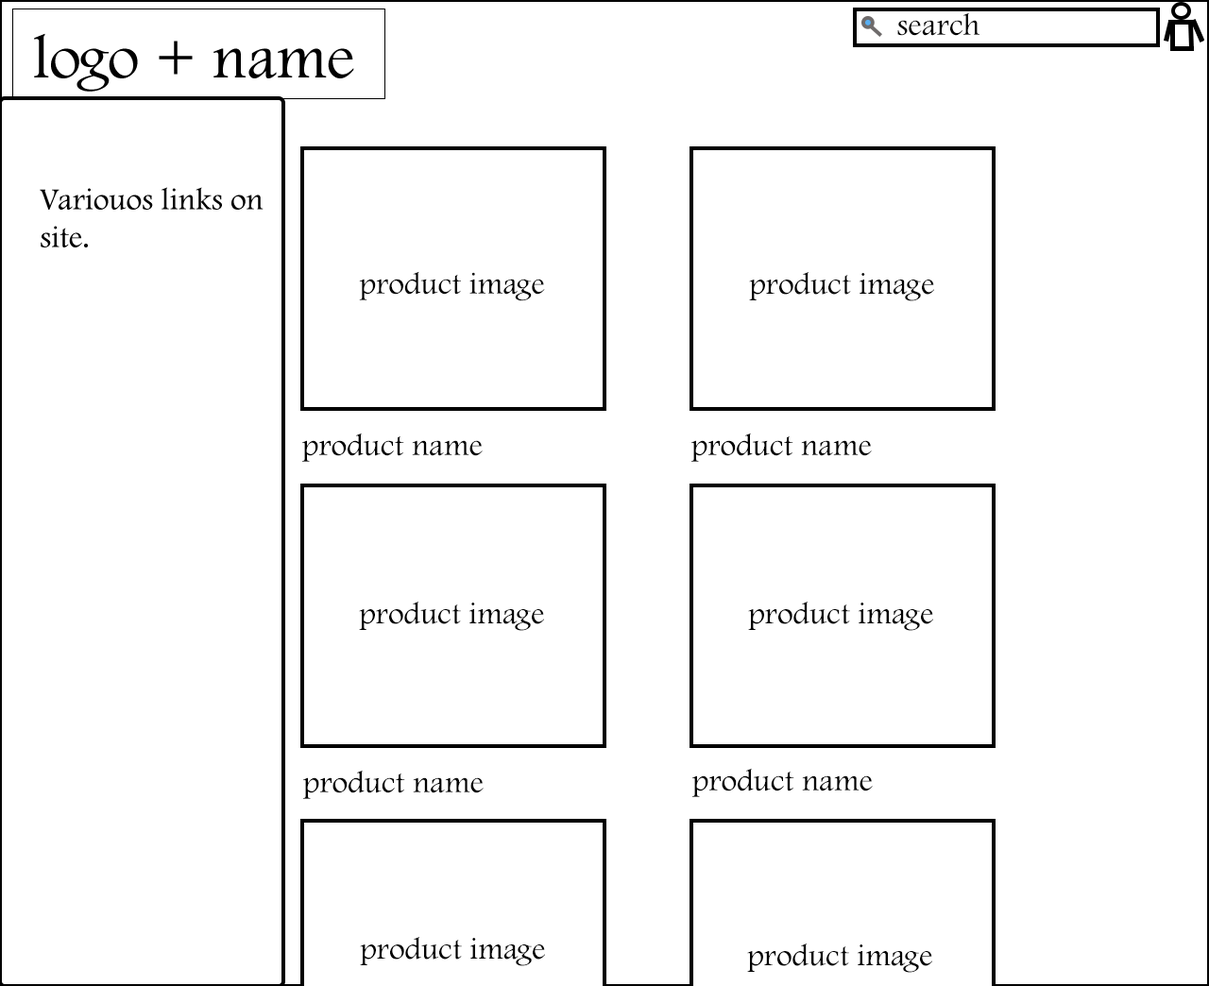
<style>
.page{position:relative;width:1209px;height:986px;background:#ffffff}
.page>*{position:absolute;margin:0}
.t1{font:31.5px "FootlightMTLight";color:#000000}
</style>
<div class="page">
<p class="t1" style="left:897px;top:12px;width:83px;height:24px">search</p>
<p class="t1" style="left:359px;top:271px;width:186px;height:30px">product image</p>
<p class="t1" style="left:749px;top:272px;width:185px;height:29px">product image</p>
<p class="t1" style="left:302px;top:433px;width:181px;height:29px">product name</p>
<p class="t1" style="left:691px;top:433px;width:181px;height:29px">product name</p>
<p class="t1" style="left:359px;top:602px;width:185px;height:29px">product image</p>
<p class="t1" style="left:748px;top:602px;width:185px;height:29px">product image</p>
<p class="t1" style="left:303px;top:770px;width:181px;height:29px">product name</p>
<p class="t1" style="left:692px;top:768px;width:181px;height:29px">product name</p>
<p class="t1" style="left:360px;top:937px;width:185px;height:29px">product image</p>
<p class="t1" style="left:747px;top:944px;width:185px;height:29px">product image</p>
</div>
